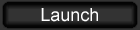
<style>
.page{position:relative;width:140px;height:30px;background:#333333}
.page>*{position:absolute;margin:0}
.t1{font:18px "ArialMT";color:#ffffff}
</style>
<div class="page">
<p class="t1" style="left:41px;top:8px;width:57px;height:14px">Launch</p>
</div>
